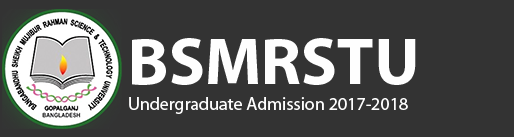
<style>
.page{position:relative;width:514px;height:137px;background:#333333}
.page>*{position:absolute;margin:0}
.t1{font:67.2px "MyriadPro-Bold";color:#fefefe}
.t2{font:18px "MyriadPro-Regular";color:#fefefe}
</style>
<div class="page">
<p class="t1" style="left:132px;top:38px;width:284px;height:47px">BSMRSTU</p>
<p class="t2" style="left:129px;top:97px;width:279px;height:17px">Undergraduate Admission 2017-2018</p>
</div>
